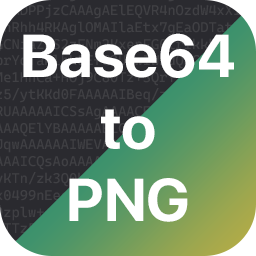
<style>
.page{position:relative;width:256px;height:256px;background:#2a2a2f}
.page>*{position:absolute;margin:0}
.t1{font:60px "SFUIDisplay-Bold";color:#ffffff}
</style>
<div class="page">
<p class="t1" style="left:23px;top:33px;width:211px;height:189px;text-align:center">Base64<br>to<br>PNG</p>
</div>
